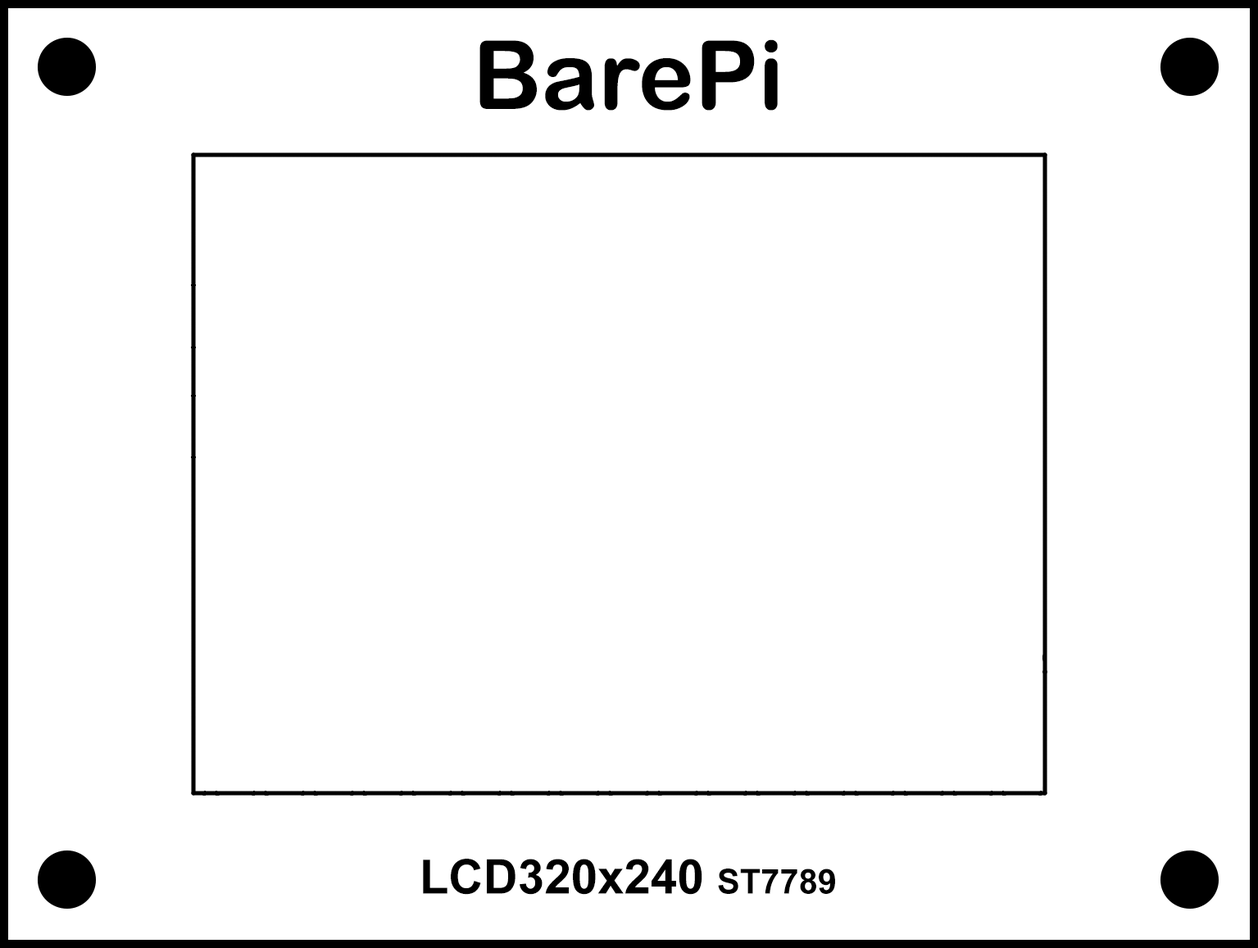
<style>
.page{position:relative;width:1258px;height:948px;background:#ffffff}
.page>*{position:absolute;margin:0}
.t1{font:95.6px "ArialRoundedMTBold";color:#000000}
.t2{font:47.8px "Arial-BoldMT";color:#000000}
.t3{font:34.1px "Arial-BoldMT";color:#000000}
</style>
<div class="page">
<p class="t1" style="left:479px;top:39px;width:299px;height:72px">BarePi</p>
<p class="t2" style="left:423px;top:859px;width:412px;height:36px">LCD320x240 <span class="t3">ST7789</span></p>
</div>
